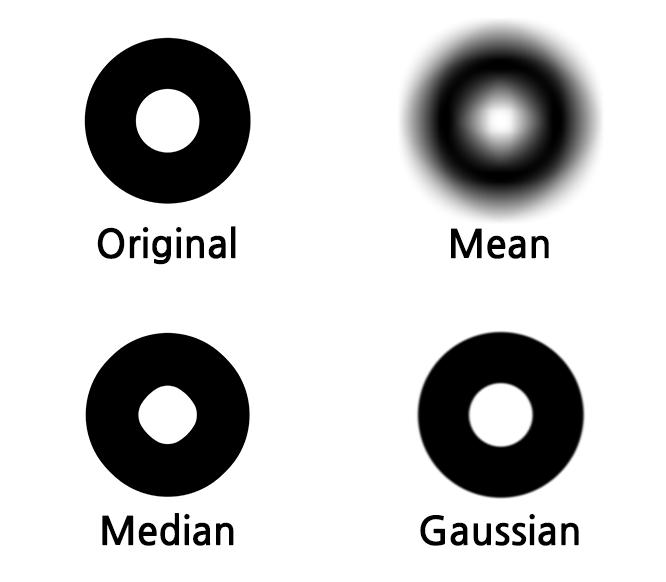
<style>
.page{position:relative;width:666px;height:582px;background:#ffffff}
.page>*{position:absolute;margin:0}
.t1{font:39.2px "NanumGothicBold";color:#000000}
</style>
<div class="page">
<p class="t1" style="left:97px;top:226px;width:139px;height:39px">Original</p>
<p class="t1" style="left:451px;top:228px;width:98px;height:31px">Mean</p>
<p class="t1" style="left:102px;top:513px;width:132px;height:33px">Median</p>
<p class="t1" style="left:420px;top:513px;width:159px;height:33px">Gaussian</p>
</div>
